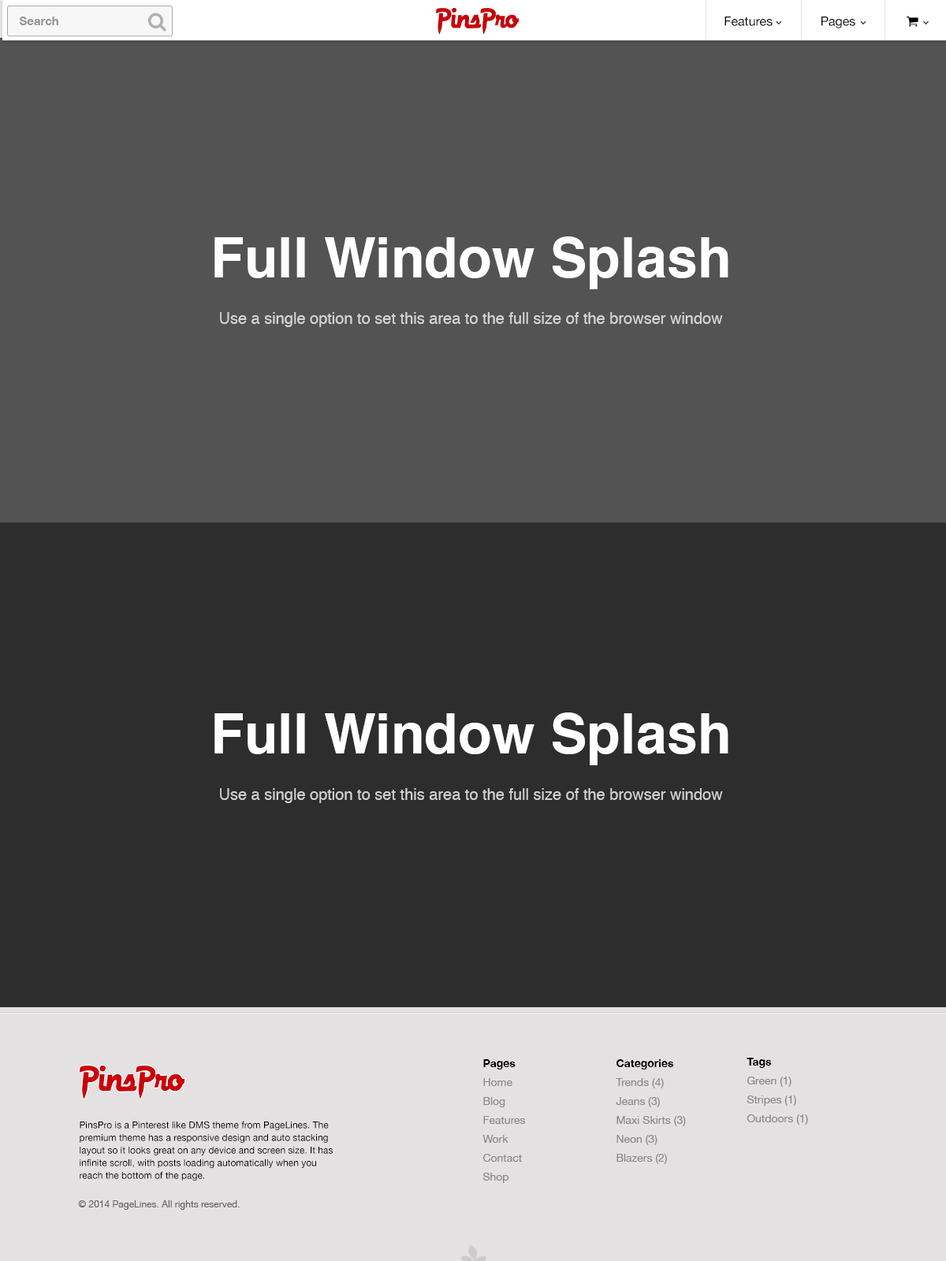
<style>
.page{position:relative;width:946px;height:1261px;background:#535353}
.page>*{position:absolute;margin:0}
.t1{font:11.9px "HelveticaNeue-Bold";color:#959595}
.t2{font:55.2px "Helvetica-Bold";color:#ffffff}
.t3{font:15.8px "Helvetica";color:#d5d5d5}
.t4{font:15.8px "Helvetica";color:#d0d0d0}
.t5{font:11px/18.9px "MyriadPro-Regular";color:#888888}
.t6{font:11px/18.9px "MyriadPro-Regular";color:#000000}
.t7{font:9.5px "HelveticaNeue";color:#000000}
.t8{font:9.5px "MyriadPro-Regular";color:#666565}
</style>
<div class="page">
<p class="t1" style="left:19px;top:17px;width:39px;height:8px">Search</p>
<p class="t2" style="left:214px;top:236px;width:514px;height:53px">Full Window Splash</p>
<p class="t3" style="left:220px;top:312px;width:503px;height:15px">Use a single option to set this area to the full size of the browser window</p>
<p class="t2" style="left:214px;top:712px;width:514px;height:53px">Full Window Splash</p>
<p class="t4" style="left:220px;top:788px;width:503px;height:15px">Use a single option to set this area to the full size of the browser window</p>
<p class="t5" style="left:482px;top:1059px;width:44px;height:124px"><span class="t6">Pages<br></span>Home<br>Blog<br>Features<br>Work<br>Contact<br>Shop</p>
<p class="t5" style="left:615px;top:1059px;width:71px;height:105px"><span class="t6">Categories<br></span>Trends (4)<br>Jeans (3)<br>Maxi Skirts (3)<br>Neon (3)<br>Blazers (2)</p>
<p class="t5" style="left:746px;top:1058px;width:62px;height:67px"><span class="t6">Tags<br></span>Green (1)<br>Stripes (1)<br>Outdoors (1)</p>
<p class="t7" style="left:80px;top:1121px;width:253px;height:60px">PinsPro is a Pinterest like DMS theme from PageLines. The premium theme has a responsive design and auto stacking layout so it looks great on any device and screen size. It has infinite scroll, with posts loading automatically when you reach the bottom of the page.</p>
<p class="t8" style="left:78px;top:1200px;width:162px;height:10px">© 2014 PageLines. All rights reserved.</p>
</div>
